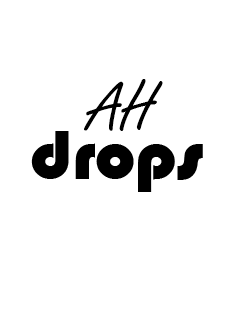
<style>
.page{position:relative;width:233px;height:322px;background:#ffffff}
.page>*{position:absolute;margin:0}
.t1{font:72px "FreestyleScript-Regular";color:#000000}
.t2{font:72px "Bauhaus93";color:#000000}
</style>
<div class="page">
<p class="t1" style="left:84px;top:79px;width:79px;height:52px">AH</p>
<p class="t2" style="left:31px;top:131px;width:172px;height:61px">drops</p>
</div>
